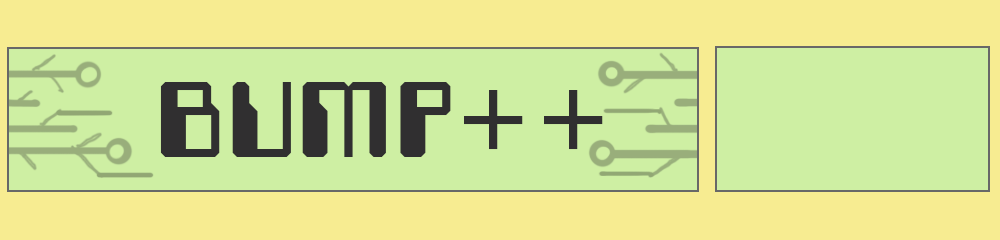
<style>
.page{position:relative;width:1000px;height:240px;background:#ceefa3}
.page>*{position:absolute;margin:0}
.t1{font:125px "Computerfont";color:#302f30}
</style>
<div class="page">
<p class="t1" style="left:160px;top:82px;width:443px;height:75px">BUMP++</p>
</div>
